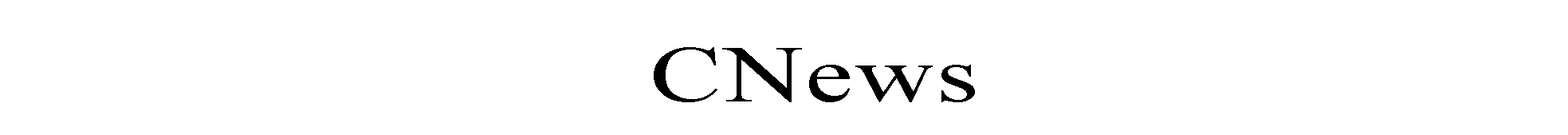
<style>
.page{position:relative;width:1568px;height:135px;background:#ffffff}
.page>*{position:absolute;margin:0}
.t1{font:80px "TimesNewRomanPSMT";letter-spacing:0.02em;color:#000000;scale:1.36 1}
</style>
<div class="page">
<p class="t1" style="left:654px;top:47px;width:321px;height:55px">CNews</p>
</div>
